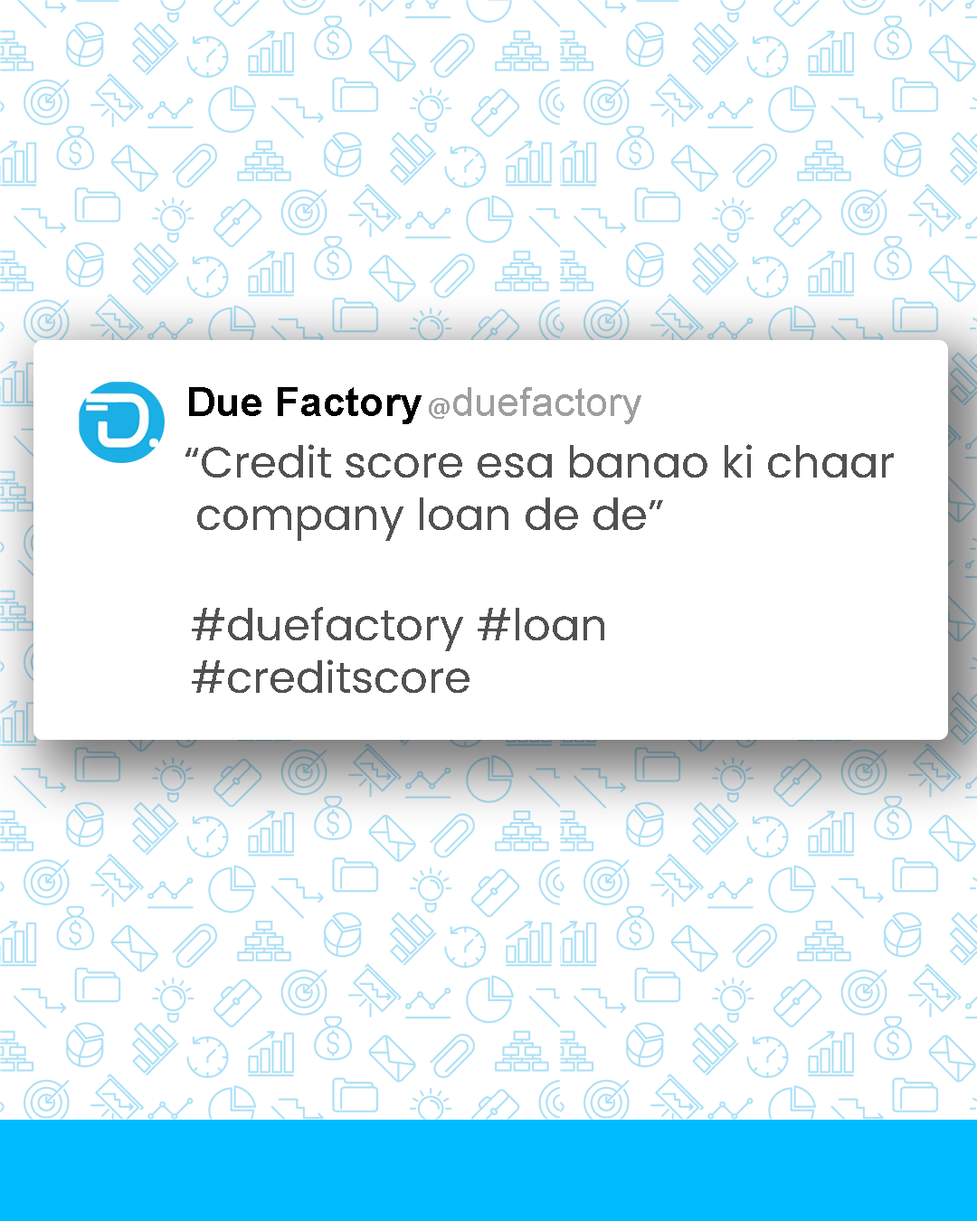
<style>
.page{position:relative;width:977px;height:1221px;background:#ffffff}
.page>*{position:absolute;margin:0}
.t1{font:40.6px "Arial-BoldMT";color:#000000}
.t2{font:40.6px "ArialMT";color:#9e9e9e}
.t3{font:25.6px "Ebrima-Bold";color:#9e9e9e}
.t4{font:43.3px/52.9px "Poppins-Regular";color:#515151}
</style>
<div class="page">
<p class="t1" style="left:189px;top:387px;width:232px;height:37px">Due Factory</p>
<p class="t2" style="left:429px;top:387px;width:212px;height:37px"><span class="t3">@</span>duefactory</p>
<p class="t4" style="left:185px;top:444px;width:709px;height:97px">“Credit score esa banao ki chaar<br> company loan de de”</p>
<p class="t4" style="left:192px;top:607px;width:412px;height:86px">#duefactory #loan <br>#creditscore</p>
</div>
